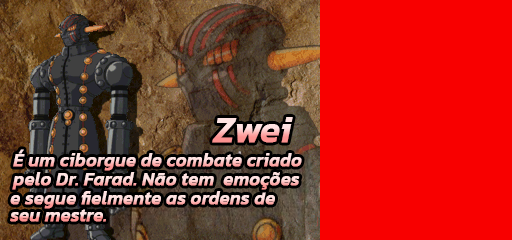
<style>
.page{position:relative;width:512px;height:240px;background:#f80000}
.page>*{position:absolute;margin:0}
.t1{font:36px "Kanit-MediumItalic";font-weight:bold}
.t2{font:18px "Kanit-MediumItalic";font-weight:bold}
</style>
<div class="page">
<p class="t1" style="left:212px;top:117px;width:81px;height:26px">Zwei</p>
<p class="t2" style="left:13px;top:149px;width:289px;height:22px">É um ciborgue de combate criado</p>
<p class="t2" style="left:12px;top:172px;width:288px;height:18px">pelo Dr. Farad. Não tem  emoções</p>
<p class="t2" style="left:10px;top:191px;width:265px;height:18px">e segue fielmente as ordens de</p>
<p class="t2" style="left:10px;top:209px;width:96px;height:13px">seu mestre.</p>
</div>
